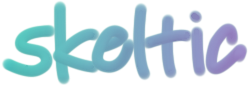
<style>
.page{position:relative;width:249px;height:85px;background:#ffffff}
.page>*{position:absolute;margin:0}
.t1{font:83.3px "InkFree"}
</style>
<div class="page">
<p class="t1" style="left:18px;top:10px;width:219px;height:63px">skeltic</p>
</div>
